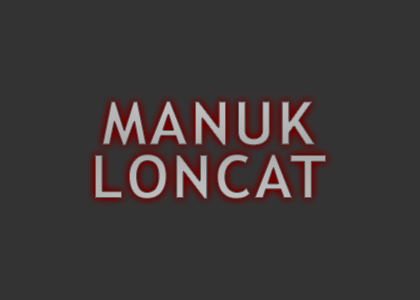
<style>
.page{position:relative;width:420px;height:300px;background:#333333}
.page>*{position:absolute;margin:0}
.t1{font:60px/53.4px "TrebuchetMS-Bold";letter-spacing:0.05em;color:#b2b2b2}
</style>
<div class="page">
<p class="t1" style="left:95px;top:101px;width:231px;height:98px;text-align:center">MANUK<br>LONCAT</p>
</div>
